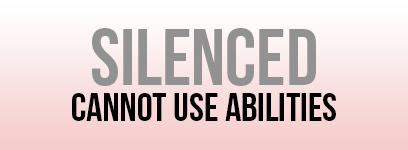
<style>
.page{position:relative;width:408px;height:150px}
.page>*{position:absolute;margin:0}
.t1{font:80px "BebasNeue";color:#929292}
.t2{font:40px "BebasNeue";color:#000000}
</style>
<div class="page">
<p class="t1" style="left:92px;top:28px;width:224px;height:58px">silenced</p>
<p class="t2" style="left:72px;top:93px;width:264px;height:28px">cannot use abilities</p>
</div>
